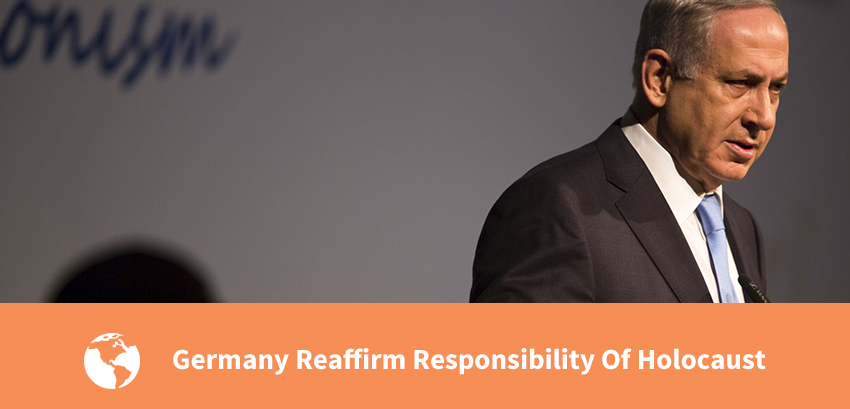
<style>
.page{position:relative;width:850px;height:409px;background:#f68e56}
.page>*{position:absolute;margin:0}
.t1{font:29px "SourceSansPro-Bold";color:#ffffff}
</style>
<div class="page">
<p class="t1" style="left:173px;top:348px;width:593px;height:27px">Germany Reaffirm Responsibility Of Holocaust</p>
</div>
